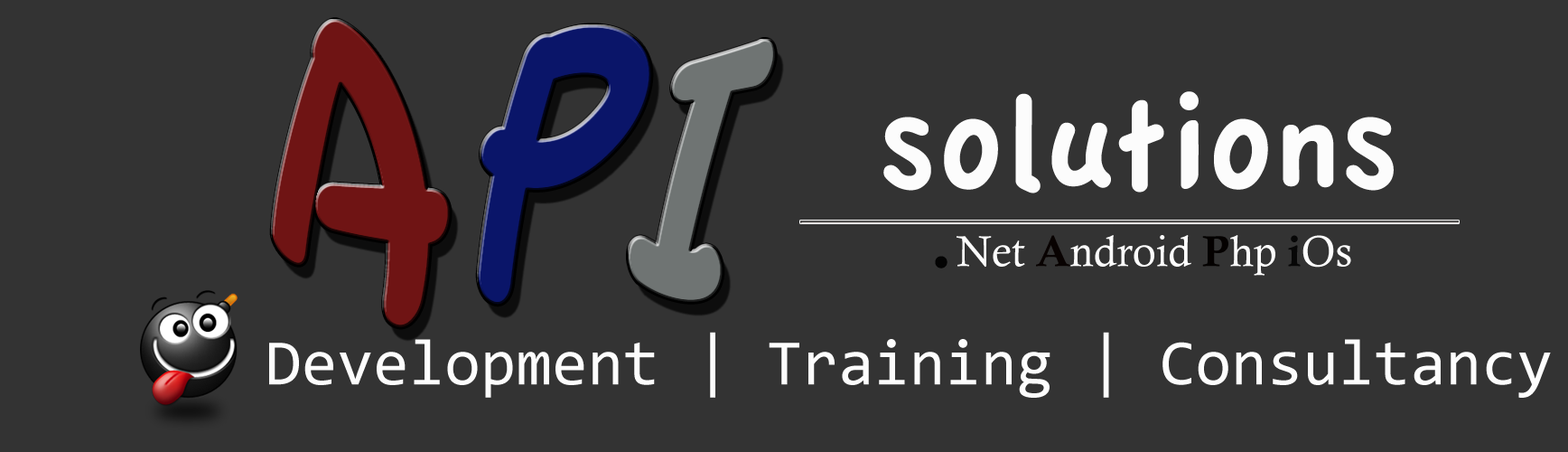
<style>
.page{position:relative;width:1568px;height:452px;background:#333333}
.page>*{position:absolute;margin:0}
.t1{font:289.7px "AppleCasual";color:#6f1414;scale:0.82 1}
.t2{font:299.5px "AppleCasual";color:#0a1569}
.t3{font:328px "AppleCasual";color:#6f7473}
.t4{font:137.5px "AppleCasual";color:#fcfcfc}
.t5{font:43.4px "CalistoMT";color:#fdfdfd}
.t6{font:108.4px "CalistoMT";color:#030303}
.t7{font:43.4px "CalisMTBol";color:#080201}
.t8{font:43.4px "CalisMTBol";color:#040100}
.t9{font:43.4px "CalisMTBol";color:#070707}
.t10{font:65px "Consolas";color:#fdfdfd}
</style>
<div class="page">
<p class="t1" style="left:272px;top:20px;width:178px;height:307px">A</p>
<p class="t2" style="left:478px;top:25px;width:173px;height:279px;rotate:13deg">P</p>
<p class="t3" style="left:629px;top:40px;width:146px;height:262px;rotate:15deg">I</p>
<p class="t4" style="left:883px;top:91px;width:511px;height:102px">solutions</p>
<p class="t5" style="left:935px;top:235px;width:416px;height:40px"><span class="t6">.</span>Net <span class="t7">A</span>ndroid <span class="t8">P</span>hp <span class="t9">i</span>Os</p>
<p class="t10" style="left:269px;top:331px;width:1282px;height:66px">Development | Training | Consultancy</p>
</div>
